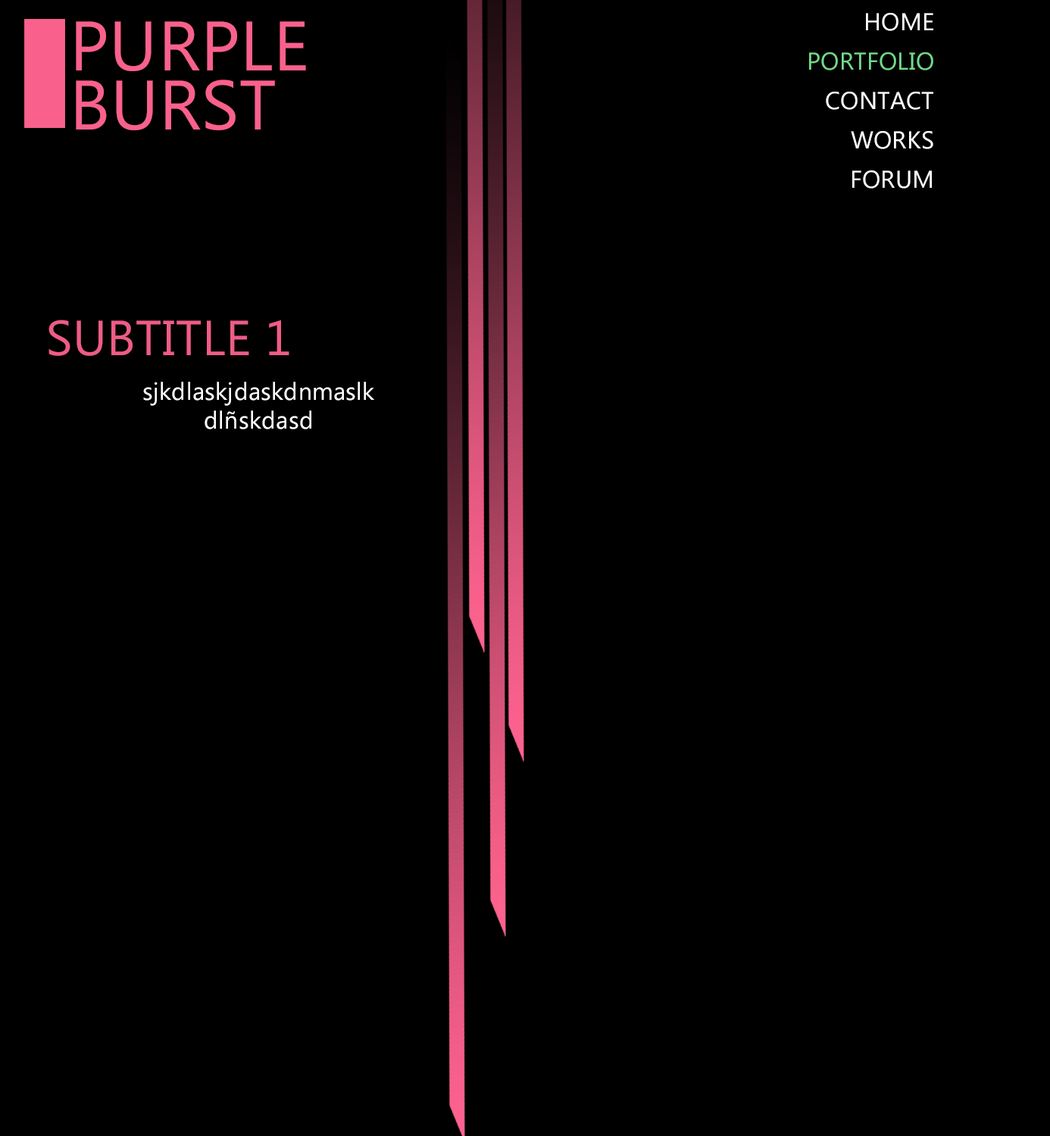
<style>
.page{position:relative;width:1050px;height:1136px;background:#000000}
.page>*{position:absolute;margin:0}
.t1{font:24.2px/39.4px "SegoeUI";letter-spacing:0.01em;color:#ffffff}
.t2{font:24.2px/39.4px "SegoeUI";letter-spacing:0.01em;color:#72da88}
.t3{font:69.7px/59.1px "SegoeUI";letter-spacing:0.01em;color:#f9618c}
.t4{font:49.2px "SegoeUI";letter-spacing:0.01em;color:#ee5c86}
.t5{font:24.2px "SegoeUI";letter-spacing:0.01em;color:#ffffff}
</style>
<div class="page">
<p class="t1" style="left:809px;top:13px;width:124px;height:176px;text-align:right">HOME<br><span class="t2">PORTFOLIO<br></span>CONTACT <br>WORKS<br>FORUM</p>
<p class="t3" style="left:76px;top:21px;width:230px;height:109px">PURPLE<br>BURST</p>
<p class="t4" style="left:48px;top:320px;width:241px;height:36px">SUBTITLE 1</p>
<p class="t5" style="left:143px;top:382px;width:231px;height:47px;text-align:center">sjkdlaskjdaskdnmaslkdlñskdasd</p>
</div>
